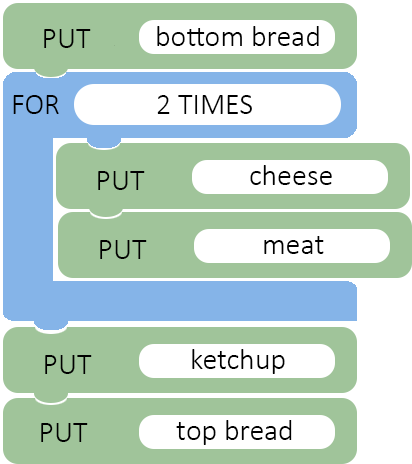
<style>
.page{position:relative;width:412px;height:464px;background:#a0c49a}
.page>*{position:absolute;margin:0}
.t1{font:30px "Calibri-Light";color:#000000}
</style>
<div class="page">
<p class="t1" style="left:44px;top:29px;width:47px;height:19px">PUT</p>
<p class="t1" style="left:157px;top:26px;width:162px;height:20px">bottom bread</p>
<p class="t1" style="left:13px;top:95px;width:46px;height:19px">FOR</p>
<p class="t1" style="left:157px;top:95px;width:95px;height:19px">2 TIMES</p>
<p class="t1" style="left:98px;top:171px;width:47px;height:19px">PUT</p>
<p class="t1" style="left:250px;top:165px;width:82px;height:20px">cheese</p>
<p class="t1" style="left:100px;top:240px;width:47px;height:19px">PUT</p>
<p class="t1" style="left:264px;top:236px;width:60px;height:18px">meat</p>
<p class="t1" style="left:192px;top:349px;width:93px;height:25px">ketchup</p>
<p class="t1" style="left:45px;top:355px;width:47px;height:19px">PUT</p>
<p class="t1" style="left:41px;top:423px;width:47px;height:19px">PUT</p>
<p class="t1" style="left:176px;top:420px;width:116px;height:25px">top bread</p>
</div>
